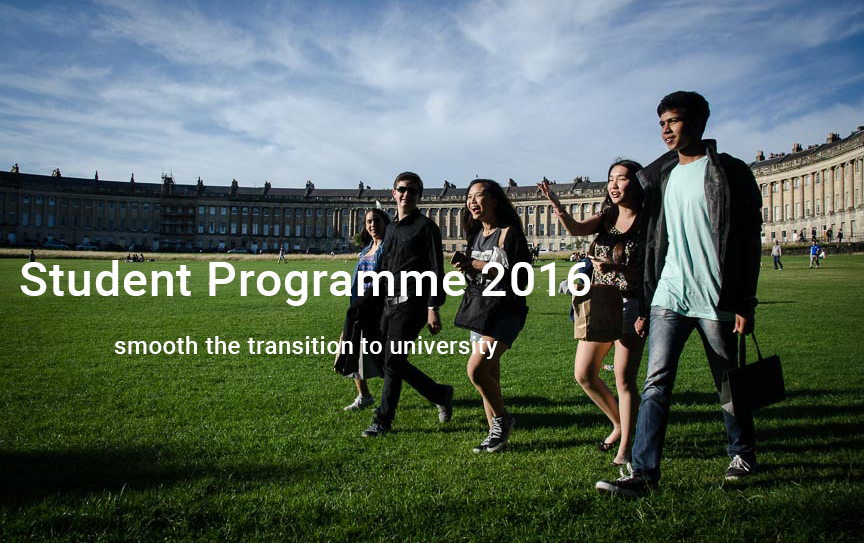
<style>
.page{position:relative;width:864px;height:543px}
.page>*{position:absolute;margin:0}
.t1{font:24px "Roboto-Medium";letter-spacing:0.02em;color:#ffffff}
.t2{font:48px "Roboto-Medium";letter-spacing:0.02em;color:#ffffff}
</style>
<div class="page">
<p class="t1" style="left:20px;top:260px;width:571px;height:99px;text-align:center"><span class="t2">Student Programme 2016<br></span>smooth the transition to university</p>
</div>
